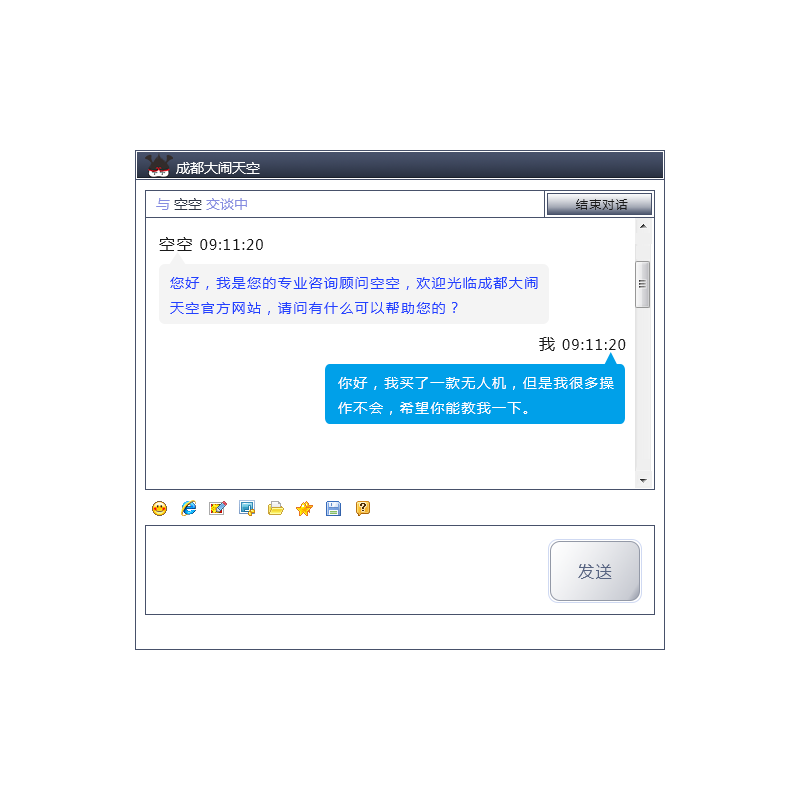
<style>
.page{position:relative;width:800px;height:800px;background:#ffffff}
.page>*{position:absolute;margin:0}
.t1{font:14px "MicrosoftYaHei";color:#ffffff}
.t2{font:14px "MicrosoftYaHei";color:#858ce1}
.t3{font:14px "MicrosoftYaHei";color:#2d3546}
.t4{font:12px "MicrosoftYaHei";letter-spacing:0.1em;color:#1a1a1a}
.t5{font:14px "MicrosoftYaHei";letter-spacing:0.1em;color:#1a1a1a}
.t6{font:16px "MicrosoftYaHei";letter-spacing:0.1em;color:#1a1a1a}
.t7{font:14px "MicrosoftYaHei";letter-spacing:0.1em;color:#2241ff}
.t8{font:14px "MicrosoftYaHei";letter-spacing:0.1em;color:#ffffff}
.t9{font:16px "MicrosoftYaHei";letter-spacing:0.1em;color:#576482}
</style>
<div class="page">
<p class="t1" style="left:176px;top:162px;width:84px;height:12px">成都大闹天空</p>
<p class="t2" style="left:156px;top:198px;width:91px;height:12px">与 <span class="t3">空空 </span>交谈中</p>
<p class="t4" style="left:576px;top:199px;width:52px;height:11px">结束对话</p>
<p class="t5" style="left:159px;top:237px;width:104px;height:14px"><span class="t6">空空</span> 09:11:20</p>
<p class="t7" style="left:170px;top:277px;width:368px;height:38px">您好，我是您的专业咨询顾问空空，欢迎光临成都大闹<br>天空官方网站，请问有什么可以帮助您的？</p>
<p class="t5" style="left:539px;top:337px;width:87px;height:14px"><span class="t6">我</span> 09:11:20</p>
<p class="t8" style="left:338px;top:377px;width:276px;height:38px">你好，我买了一款无人机，但是我很多操<br>作不会，希望你能教我一下。</p>
<p class="t9" style="left:578px;top:564px;width:34px;height:15px">发送</p>
</div>
